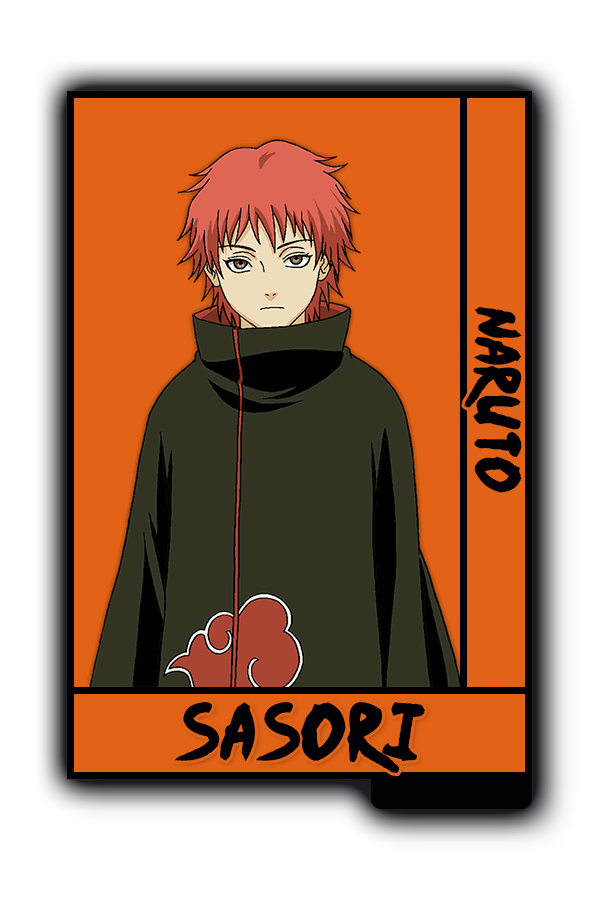
<style>
.page{position:relative;width:600px;height:900px;background:#e26317}
.page>*{position:absolute;margin:0}
.t1{font:52px "Ninja-Naruto";color:#010005}
.t2{font:65.2px "Ninja-Naruto";color:#010005}
</style>
<div class="page">
<p class="t1" style="left:464px;top:307px;width:59px;height:186px;rotate:90deg">Naruto</p>
<p class="t2" style="left:175px;top:702px;width:250px;height:72px">Sasori</p>
</div>
